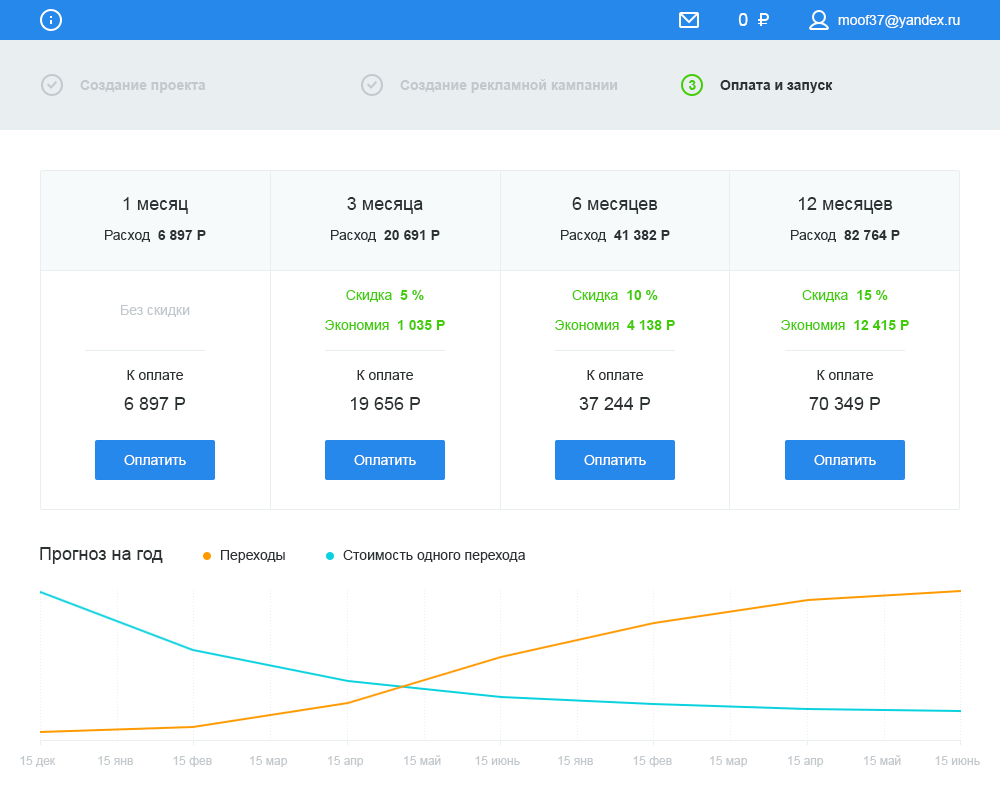
<style>
.page{position:relative;width:1000px;height:800px;background:#ffffff}
.page>*{position:absolute;margin:0}
.t1{font:18px "ArialMT";color:#ffffff}
.t2{font:14px "ArialMT";color:#ffffff}
.t3{font:14px "Arial-BoldMT";color:#c3c8cc}
.t4{font:14px "Arial-BoldMT";color:#42cc05}
.t5{font:14px "Arial-BoldMT";color:#2c3133}
.t6{font:18px "ArialMT";color:#2c3133}
.t7{font:14px "ArialMT";color:#2c3133}
.t8{font:14px "ArialMT";color:#42cc05}
.t9{font:14px "ArialMT";color:#c3c8cc}
.t10{font:12px "ArialMT";color:#c3c8cc}
</style>
<div class="page">
<p class="t1" style="left:738px;top:13px;width:10px;height:13px">0</p>
<p class="t2" style="left:838px;top:15px;width:122px;height:13px">moof37@yandex.ru</p>
<p class="t3" style="left:80px;top:80px;width:126px;height:13px">Создание проекта</p>
<p class="t3" style="left:400px;top:79px;width:218px;height:14px">Создание рекламной кампании</p>
<p class="t4" style="left:689px;top:80px;width:7px;height:10px">3</p>
<p class="t5" style="left:720px;top:80px;width:113px;height:13px">Оплата и запуск</p>
<p class="t6" style="left:123px;top:197px;width:65px;height:17px">1 месяц</p>
<p class="t6" style="left:347px;top:197px;width:76px;height:17px">3 месяца</p>
<p class="t6" style="left:572px;top:197px;width:86px;height:17px">6 месяцев</p>
<p class="t6" style="left:798px;top:197px;width:95px;height:17px">12 месяцев</p>
<p class="t5" style="left:105px;top:230px;width:101px;height:12px"><span class="t7">Расход  </span>6 897 Р</p>
<p class="t5" style="left:331px;top:230px;width:109px;height:12px"><span class="t7">Расход  </span>20 691 Р</p>
<p class="t5" style="left:561px;top:230px;width:109px;height:12px"><span class="t7">Расход  </span>41 382 Р</p>
<p class="t5" style="left:791px;top:230px;width:109px;height:12px"><span class="t7">Расход  </span>82 764 Р</p>
<p class="t8" style="left:346px;top:290px;width:78px;height:12px">Скидка  <span class="t4">5 %</span></p>
<p class="t8" style="left:572px;top:290px;width:86px;height:12px">Скидка  <span class="t4">10 %</span></p>
<p class="t8" style="left:802px;top:290px;width:86px;height:12px">Скидка  <span class="t4">15 %</span></p>
<p class="t9" style="left:121px;top:305px;width:69px;height:12px">Без скидки</p>
<p class="t8" style="left:325px;top:320px;width:120px;height:10px">Экономия  <span class="t4">1 035 Р</span></p>
<p class="t8" style="left:555px;top:320px;width:120px;height:10px">Экономия  <span class="t4">4 138 Р</span></p>
<p class="t8" style="left:781px;top:320px;width:128px;height:10px">Экономия  <span class="t4">12 415 Р</span></p>
<p class="t7" style="left:127px;top:370px;width:57px;height:10px">К оплате</p>
<p class="t7" style="left:357px;top:370px;width:57px;height:10px">К оплате</p>
<p class="t7" style="left:587px;top:370px;width:57px;height:10px">К оплате</p>
<p class="t7" style="left:817px;top:370px;width:57px;height:10px">К оплате</p>
<p class="t6" style="left:124px;top:397px;width:62px;height:13px">6 897 Р</p>
<p class="t6" style="left:350px;top:397px;width:71px;height:13px">19 656 Р</p>
<p class="t6" style="left:579px;top:397px;width:72px;height:13px">37 244 Р</p>
<p class="t6" style="left:809px;top:397px;width:72px;height:13px">70 349 Р</p>
<p class="t2" style="left:124px;top:455px;width:62px;height:10px">Оплатить</p>
<p class="t2" style="left:354px;top:455px;width:62px;height:10px">Оплатить</p>
<p class="t2" style="left:584px;top:455px;width:62px;height:10px">Оплатить</p>
<p class="t2" style="left:814px;top:455px;width:62px;height:10px">Оплатить</p>
<p class="t6" style="left:40px;top:547px;width:123px;height:17px">Прогноз на год</p>
<p class="t7" style="left:221px;top:550px;width:64px;height:13px">Переходы</p>
<p class="t7" style="left:343px;top:550px;width:182px;height:13px">Стоимость одного перехода</p>
<p class="t10" style="left:20px;top:756px;width:36px;height:11px">15 дек</p>
<p class="t10" style="left:98px;top:756px;width:35px;height:9px">15 янв</p>
<p class="t10" style="left:173px;top:756px;width:39px;height:11px">15 фев</p>
<p class="t10" style="left:250px;top:756px;width:38px;height:11px">15 мар</p>
<p class="t10" style="left:328px;top:756px;width:36px;height:11px">15 апр</p>
<p class="t10" style="left:404px;top:755px;width:37px;height:10px">15 май</p>
<p class="t10" style="left:475px;top:756px;width:45px;height:9px">15 июнь</p>
<p class="t10" style="left:558px;top:756px;width:35px;height:9px">15 янв</p>
<p class="t10" style="left:633px;top:756px;width:39px;height:11px">15 фев</p>
<p class="t10" style="left:710px;top:756px;width:38px;height:11px">15 мар</p>
<p class="t10" style="left:788px;top:756px;width:36px;height:11px">15 апр</p>
<p class="t10" style="left:864px;top:755px;width:37px;height:10px">15 май</p>
<p class="t10" style="left:935px;top:756px;width:45px;height:9px">15 июнь</p>
</div>
